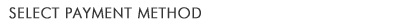
<style>
.page{position:relative;width:400px;height:24px;background:#ffffff}
.page>*{position:absolute;margin:0}
.t1{font:14.7px "FuturaBT-Light";letter-spacing:0.025em;color:#363636;text-transform:uppercase;font-weight:bold}
</style>
<div class="page">
<p class="t1" style="left:9px;top:7px;width:192px;height:12px">select payment method</p>
</div>
